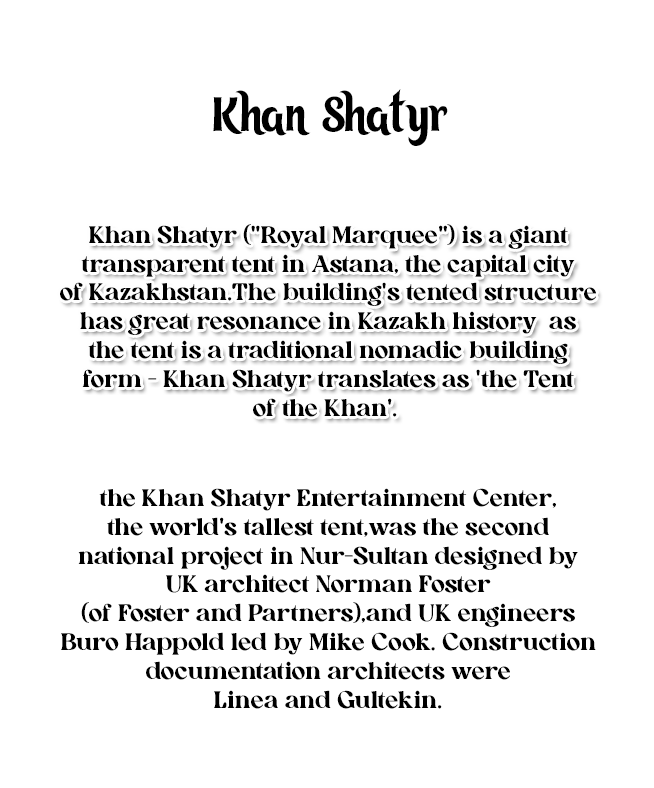
<style>
.page{position:relative;width:654px;height:788px;background:#ffffff}
.page>*{position:absolute;margin:0}
.t1{font:48px "KZ_Tangak-Regular";color:#000000}
.t2{font:24px "AllenoireFreePersonal-Regular";color:#000000}
</style>
<div class="page">
<p class="t1" style="left:213px;top:89px;width:235px;height:57px">Khan Shatyr</p>
<p class="t2" style="left:60px;top:224px;width:536px;height:193px;text-align:center">Khan Shatyr ("Royal Marquee") is a giant<br>transparent tent in Astana, the capital city<br>of Kazakhstan.The building's tented structure<br>has great resonance in Kazakh history  as<br>the tent is a traditional nomadic building<br>form - Khan Shatyr translates as 'the Tent<br>of the Khan'.</p>
<p class="t2" style="left:61px;top:488px;width:535px;height:221px;text-align:center">the Khan Shatyr Entertainment Center,<br>the world's tallest tent,was the second<br>national project in Nur-Sultan designed by<br>UK architect Norman Foster<br> (of Foster and Partners),and UK engineers <br>Buro Happold led by Mike Cook. Construction<br>documentation architects were<br>Linea and Gultekin.</p>
</div>
